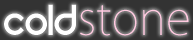
<style>
.page{position:relative;width:193px;height:40px;background:#333333}
.page>*{position:absolute;margin:0}
.t1{font:46px "KozGoPro-ExtraLight";color:#ffcae0}
.t2{font:48px "REZ";color:#ffffff}
</style>
<div class="page">
<p class="t1" style="left:4px;top:4px;width:185px;height:32px"><span class="t2">cold</span>stone</p>
</div>
